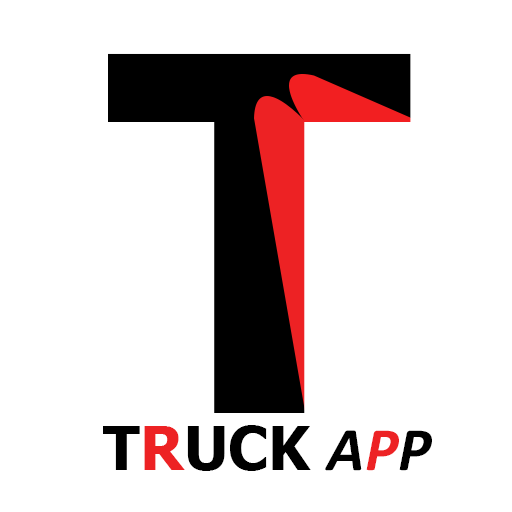
<style>
.page{position:relative;width:512px;height:512px;background:#ffffff}
.page>*{position:absolute;margin:0}
.t1{font:493.8px "Tahoma-Bold";color:#000000}
.t2{font:60.3px "Tahoma-Bold";color:#000000}
.t3{font:60.3px "Tahoma-Bold";color:#ed2224}
.t4{font:62.2px "Calibri-BoldItalic";color:#000000}
.t5{font:62.2px "Calibri-BoldItalic";color:#ed2224}
</style>
<div class="page">
<p class="t1" style="left:108px;top:53px;width:303px;height:360px">T</p>
<p class="t2" style="left:103px;top:425px;width:329px;height:46px">T<span class="t3">R</span>UCK <span class="t4">A</span><span class="t5">P</span><span class="t4">P</span></p>
</div>
